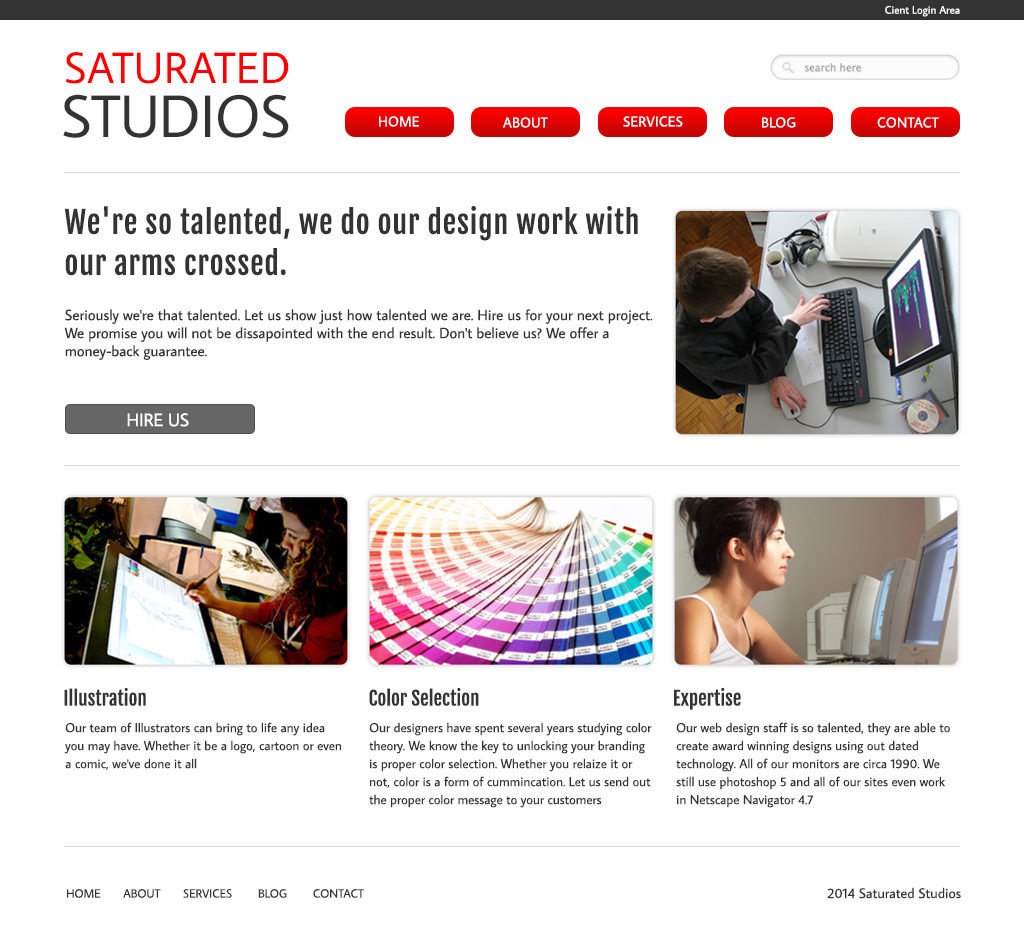
<style>
.page{position:relative;width:1024px;height:940px;background:#ffffff}
.page>*{position:absolute;margin:0}
.t1{font:11px "AverageSans-Regular";color:#ffffff}
.t2{font:44px "AverageSans-Regular";letter-spacing:0.01em;color:#ff0000}
.t3{font:60px "AverageSans-Regular";letter-spacing:-0.01em;color:#333333}
.t4{font:14px "AverageSans-Regular";letter-spacing:0.025em;color:#ffffff}
.t5{font:30px "FjallaOne-Regular";letter-spacing:0.025em;color:#333333}
.t6{font:15px "AverageSans-Regular";color:#333333}
.t7{font:18px "AverageSans-Regular";color:#ffffff}
.t8{font:19px "FjallaOne-Regular";color:#333333}
.t9{font:13px/18px "AverageSans-Regular";color:#333333}
.t10{font:12px "AverageSans-Regular";color:#333333}
.t11{font:14px "AverageSans-Regular";color:#333333}
</style>
<div class="page">
<p class="t1" style="left:885px;top:5px;width:75px;height:12px">Cient Login Area</p>
<p class="t2" style="left:65px;top:52px;width:224px;height:32px">SATURATED</p>
<p class="t3" style="left:63px;top:94px;width:226px;height:44px">STUDIOS</p>
<p class="t4" style="left:379px;top:116px;width:40px;height:11px">HOME</p>
<p class="t4" style="left:503px;top:117px;width:45px;height:11px">ABOUT</p>
<p class="t4" style="left:623px;top:116px;width:60px;height:11px">SERVICES</p>
<p class="t4" style="left:762px;top:117px;width:34px;height:11px">BLOG</p>
<p class="t4" style="left:877px;top:117px;width:62px;height:11px">CONTACT</p>
<p class="t5" style="left:64px;top:206px;width:574px;height:70px">We're so talented, we do our design work with our arms crossed.</p>
<p class="t6" style="left:64px;top:309px;width:589px;height:51px">Seriously we're that talented. Let us show just how talented we are. Hire us for your next project. We promise you will not be dissapointed with the end result. Don't believe us? We offer a <br>money-back guarantee.</p>
<p class="t7" style="left:127px;top:413px;width:62px;height:14px">HIRE US</p>
<p class="t8" style="left:64px;top:687px;width:82px;height:19px">Illustration</p>
<p class="t8" style="left:369px;top:687px;width:110px;height:19px">Color Selection</p>
<p class="t8" style="left:674px;top:687px;width:67px;height:23px">Expertise</p>
<p class="t9" style="left:64px;top:722px;width:277px;height:48px">Our team of Illustrators can bring to life any idea you may have. Whether it be a logo, cartoon or even a comic, we've done it all</p>
<p class="t9" style="left:369px;top:722px;width:283px;height:86px">Our designers have spent several years studying color theory. We know the key to unlocking your branding is proper color selection. Whether you relaize it or not, color is a form of cummincation. Let us send out the proper color message to your customers</p>
<p class="t9" style="left:676px;top:722px;width:274px;height:86px">Our web design staff is so talented, they are able to create award winning designs using out dated technology. All of our monitors are circa 1990. We still use photoshop 5 and all of our sites even work in Netscape Navigator 4.7</p>
<p class="t10" style="left:67px;top:889px;width:297px;height:9px">HOME       ABOUT       SERVICES        BLOG        CONTACT</p>
<p class="t11" style="left:827px;top:887px;width:134px;height:12px">2014 Saturated Studios</p>
</div>
